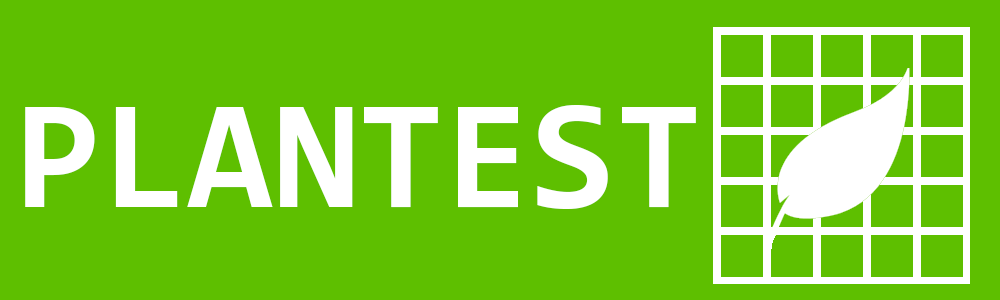
<style>
.page{position:relative;width:1000px;height:300px;background:#5ebf00}
.page>*{position:absolute;margin:0}
.t1{font:156px "Consolas-Bold";color:#ffffff}
</style>
<div class="page">
<p class="t1" style="left:25px;top:105px;width:671px;height:104px">PLANTEST</p>
<p class="t1" style="left:25px;top:105px;width:671px;height:104px">PLANTEST</p>
</div>
